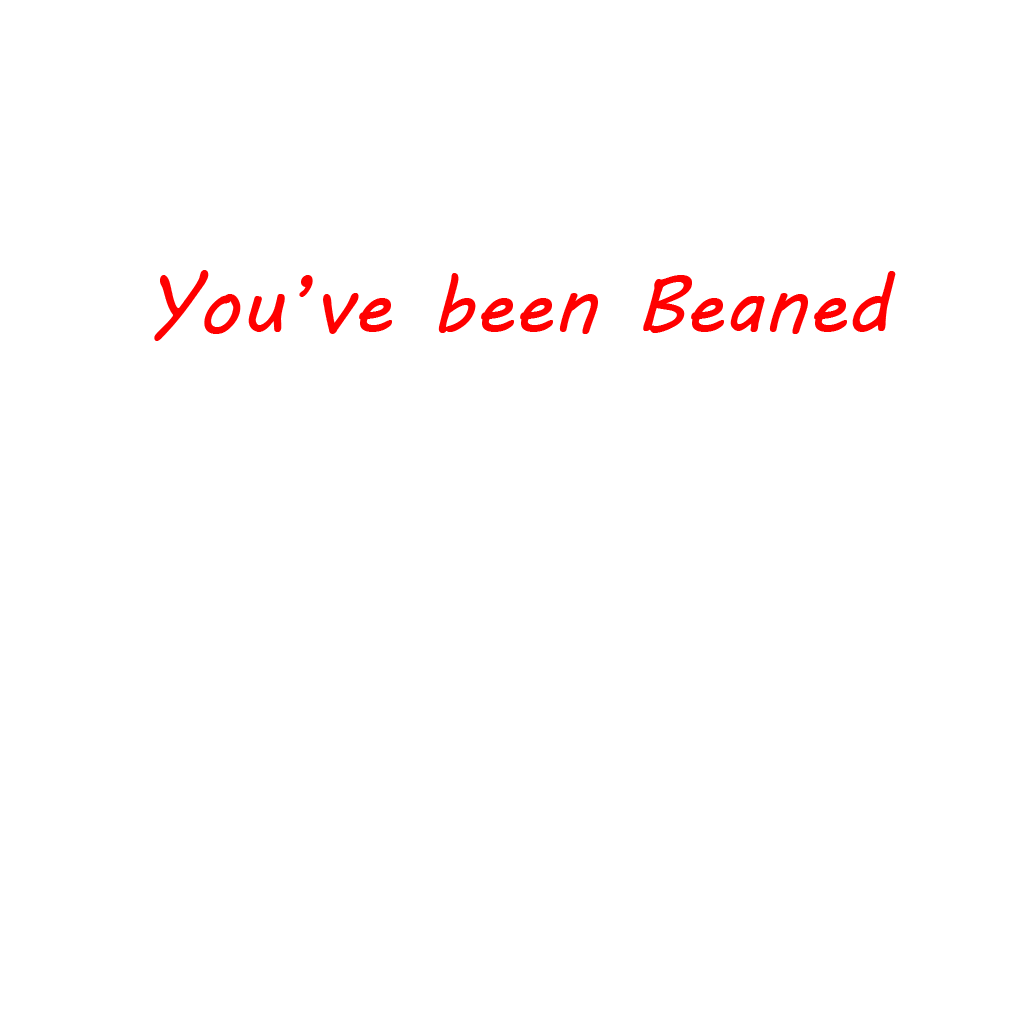
<style>
.page{position:relative;width:1024px;height:1024px;background:#ffffff}
.page>*{position:absolute;margin:0}
.t1{font:80px "MVBoli";color:#ff0000}
</style>
<div class="page">
<p class="t1" style="left:154px;top:270px;width:742px;height:71px">You’ve been Beaned</p>
</div>
